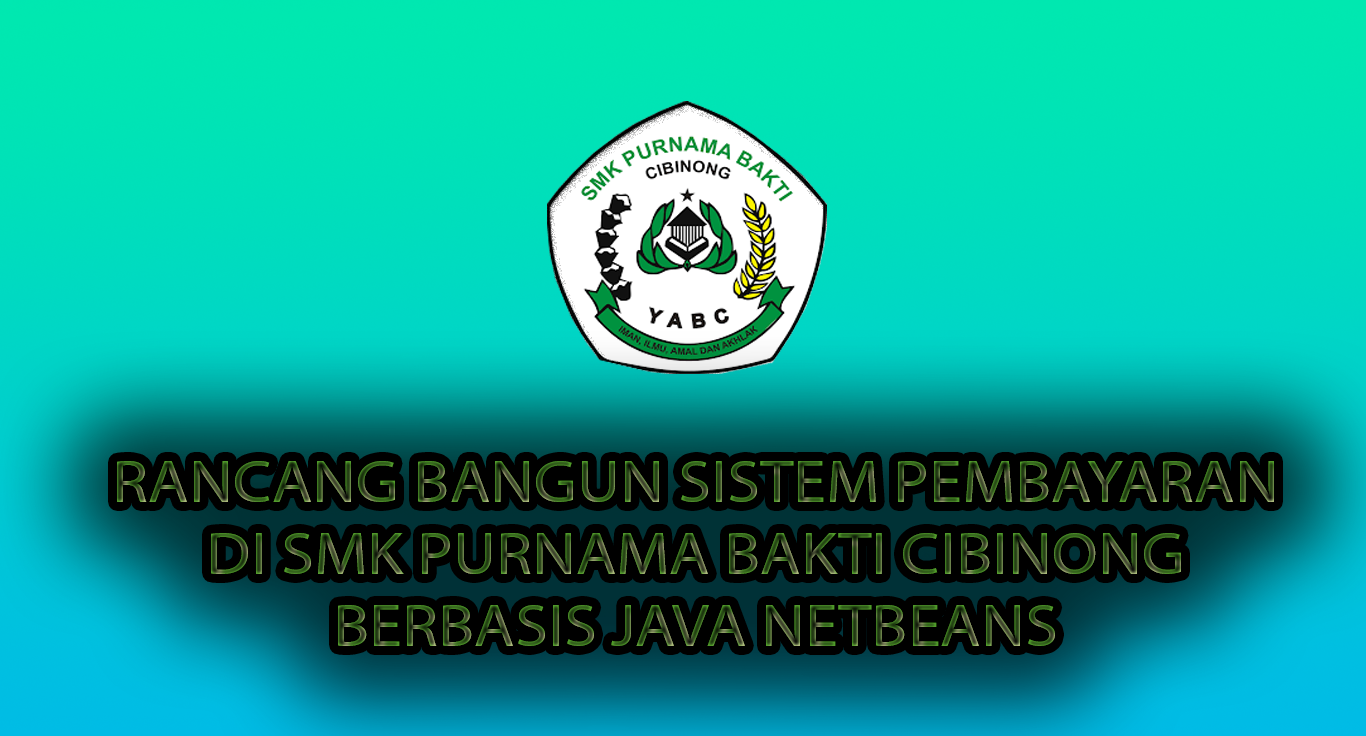
<style>
.page{position:relative;width:1366px;height:736px}
.page>*{position:absolute;margin:0}
.t1{font:59.9px "MyriadPro-Regular";scale:1.11 1}
</style>
<div class="page">
<p class="t1" style="left:117px;top:461px;width:1157px;height:185px;text-align:center">RANCANG BANGUN SISTEM PEMBAYARAN<br>DI SMK PURNAMA BAKTI CIBINONG<br>BERBASIS JAVA NETBEANS</p>
</div>
